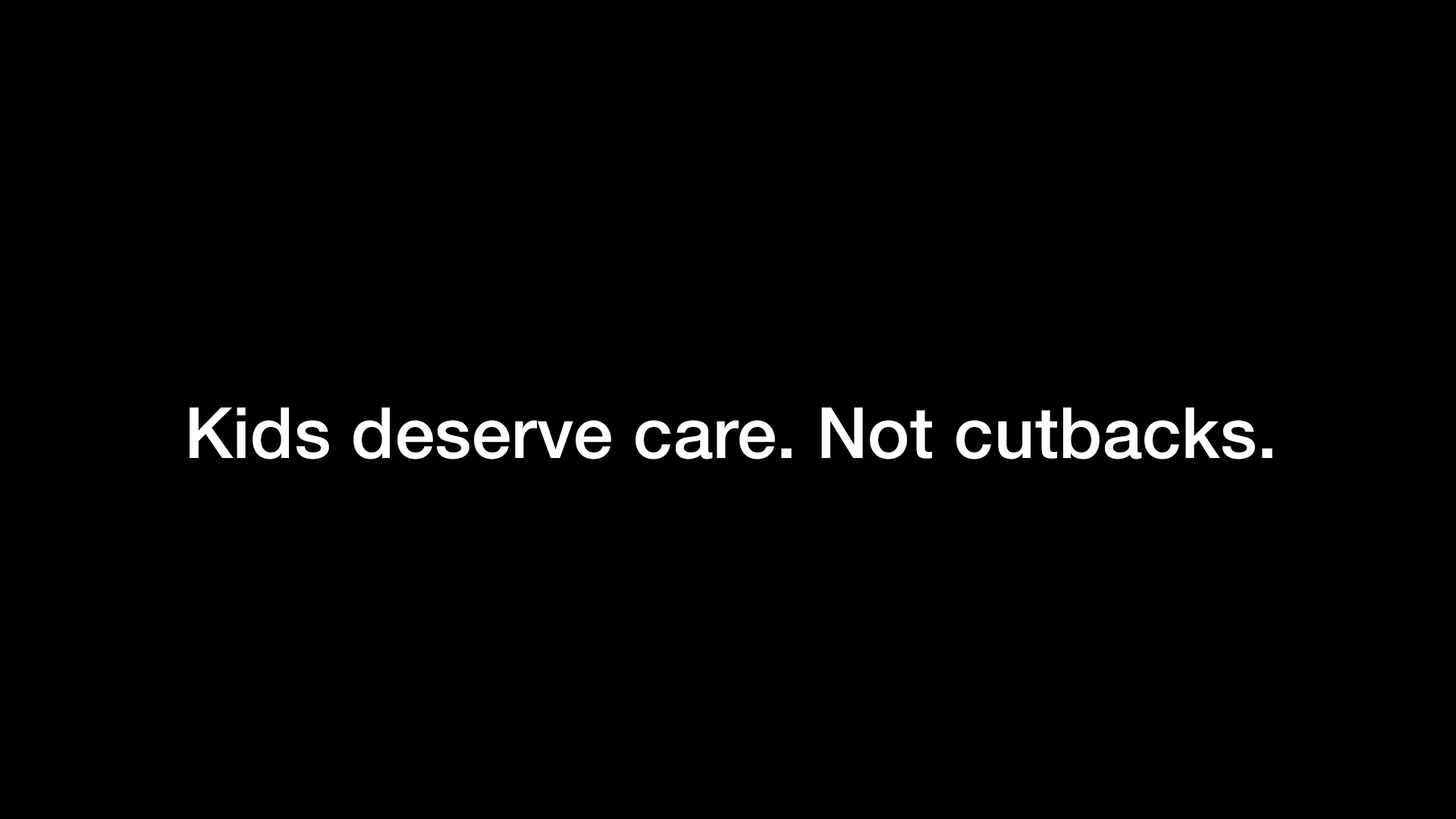
<style>
.page{position:relative;width:1456px;height:819px;background:#000000}
.page>*{position:absolute;margin:0}
.t1{font:70.8px "HelveticaNeue-Medium";letter-spacing:0.005em;color:#ffffff}
</style>
<div class="page">
<p class="t1" style="left:190px;top:407px;width:1082px;height:53px">Kids deserve care. Not cutbacks.</p>
</div>
